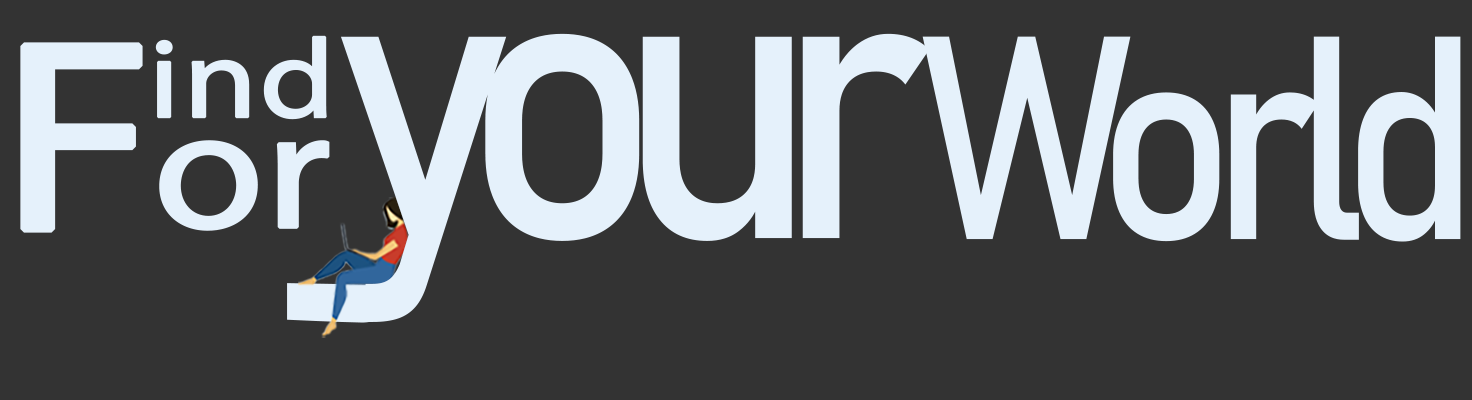
<style>
.page{position:relative;width:1472px;height:400px;background:#333333}
.page>*{position:absolute;margin:0}
.t1{font:113px "MyriadPro-Regular";color:#e5f1fb;font-weight:bold;scale:1.17 1}
.t2{font:396.6px "Bahnschrift";letter-spacing:-0.12em;color:#e5f1fb;font-weight:bold;scale:0.93 1}
.t3{font:284.8px "Bahnschrift";letter-spacing:-0.1em;color:#e5f1fb;font-weight:bold;scale:0.89 1}
.t4{font:271.1px "MyriadPro-Regular";color:#e5f1fb;font-weight:bold;scale:1.17 1}
.t5{font:172.2px "MyriadPro-Regular";letter-spacing:-0.02em;color:#e5f1fb;font-weight:bold;scale:1.17 1}
</style>
<div class="page">
<p class="t1" style="left:155px;top:35px;width:172px;height:85px">ind</p>
<p class="t2" style="left:340px;top:33px;width:590px;height:289px">your</p>
<p class="t3" style="left:922px;top:36px;width:539px;height:206px">World</p>
<p class="t4" style="left:20px;top:42px;width:123px;height:191px">F</p>
<p class="t5" style="left:159px;top:140px;width:171px;height:91px">or</p>
</div>
